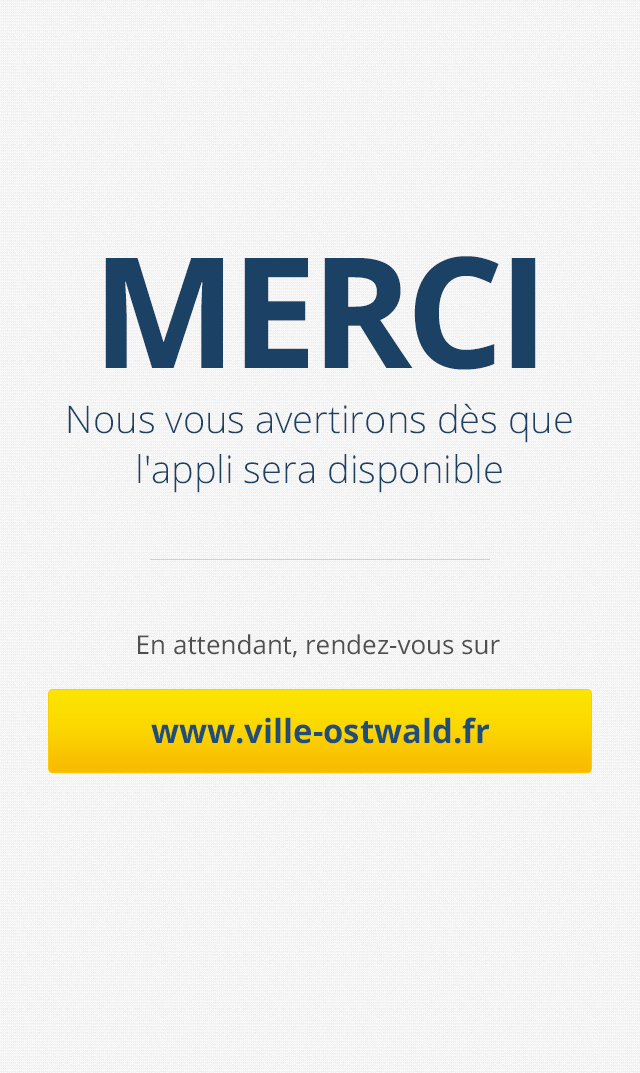
<style>
.page{position:relative;width:640px;height:1073px}
.page>*{position:absolute;margin:0}
.t1{font:154.4px "OpenSans-Bold";letter-spacing:-0.04em;color:#1b4164;text-transform:uppercase}
.t2{font:38.1px/50.8px "OpenSans-Light";color:#1b4164}
.t3{font:26px "OpenSans";color:#4f4f4f}
.t4{font:33.2px "OpenSans-Bold";color:#214e74}
</style>
<div class="page">
<p class="t1" style="left:105px;top:256px;width:431px;height:114px">Merci</p>
<p class="t2" style="left:68px;top:403px;width:504px;height:90px;text-align:center">Nous vous avertirons dès que l'appli sera disponible</p>
<p class="t3" style="left:138px;top:634px;width:362px;height:24px">En attendant, rendez-vous sur</p>
<p class="t4" style="left:151px;top:717px;width:339px;height:27px">www.ville-ostwald.fr</p>
</div>
